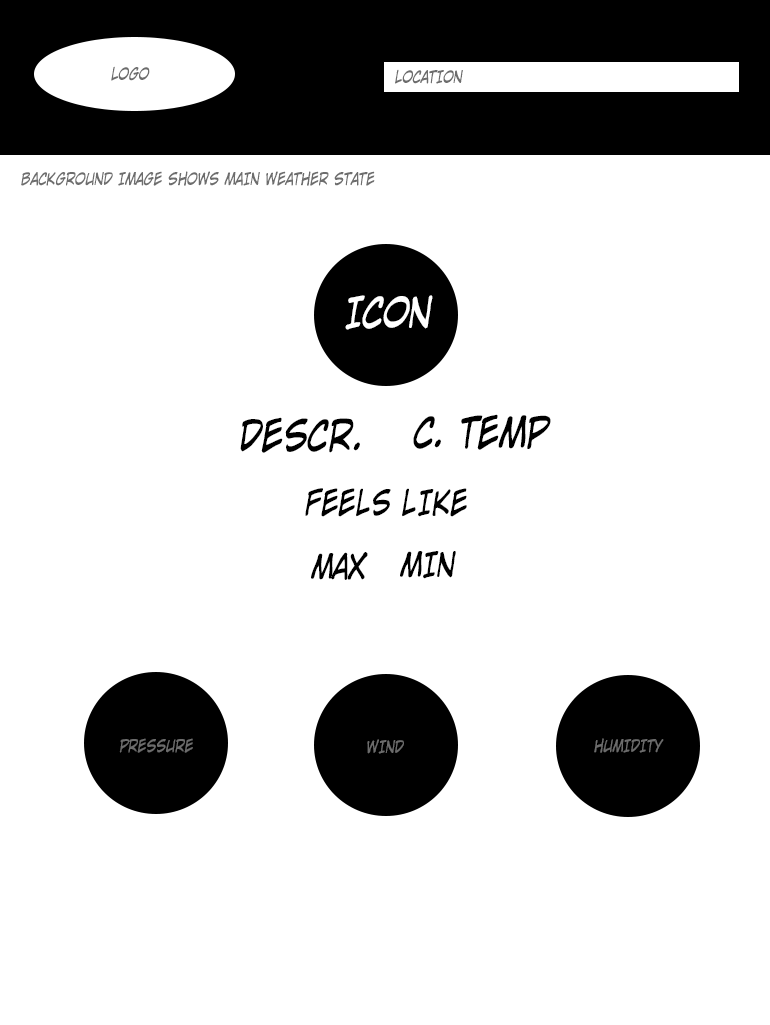
<style>
.page{position:relative;width:770px;height:1025px;background:#ffffff}
.page>*{position:absolute;margin:0}
.t1{font:16.7px "WildWordsRus";color:#6c6c6c;text-transform:uppercase;font-style:italic;scale:0.8 1}
.t2{font:41.7px "WildWordsRus";color:#ffffff;text-transform:uppercase;font-style:italic;scale:0.8 1}
.t3{font:41.7px "WildWordsRus";color:#000000;text-transform:uppercase;font-style:italic;scale:0.8 1}
.t4{font:33.3px "WildWordsRus";color:#000000;text-transform:uppercase;font-style:italic;scale:0.8 1}
</style>
<div class="page">
<p class="t1" style="left:111px;top:66px;width:39px;height:15px">logo</p>
<p class="t1" style="left:395px;top:69px;width:68px;height:15px">location</p>
<p class="t1" style="left:21px;top:171px;width:354px;height:15px">background image shows main weather state</p>
<p class="t2" style="left:345px;top:295px;width:88px;height:35px">icon</p>
<p class="t3" style="left:413px;top:414px;width:138px;height:36px">c. temp</p>
<p class="t3" style="left:240px;top:417px;width:120px;height:36px">descr.</p>
<p class="t4" style="left:305px;top:488px;width:162px;height:29px">feels like</p>
<p class="t4" style="left:311px;top:552px;width:57px;height:28px">max</p>
<p class="t4" style="left:400px;top:551px;width:56px;height:28px">min</p>
<p class="t1" style="left:119px;top:738px;width:74px;height:15px">pressure</p>
<p class="t1" style="left:367px;top:739px;width:37px;height:15px">wind</p>
<p class="t1" style="left:594px;top:738px;width:70px;height:15px">humidity</p>
</div>
